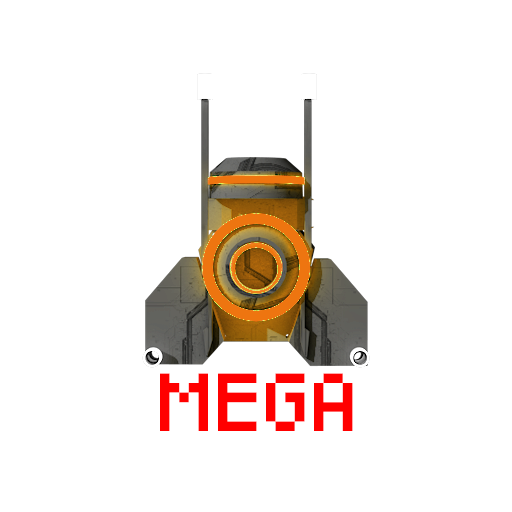
<style>
.page{position:relative;width:512px;height:512px;background:#ffffff}
.page>*{position:absolute;margin:0}
.t1{font:48px "Pixeled";color:#ff0000}
</style>
<div class="page">
<p class="t1" style="left:160px;top:373px;width:193px;height:58px">MEGA</p>
</div>
